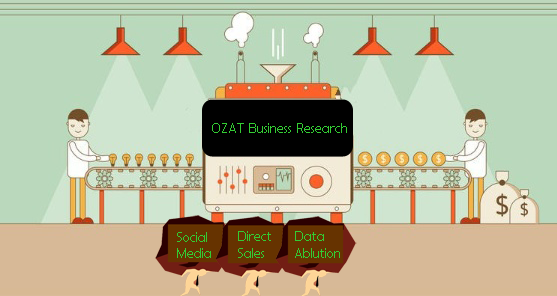
<style>
.page{position:relative;width:557px;height:296px}
.page>*{position:absolute;margin:0}
.t1{font:14px "BerlinSansFB-Reg";color:#33cc33}
</style>
<div class="page">
<p class="t1" style="left:177px;top:232px;width:34px;height:26px">Social<br>Media</p>
<p class="t1" style="left:238px;top:231px;width:33px;height:27px">Direct Sales</p>
<p class="t1" style="left:295px;top:231px;width:45px;height:27px">Data Ablution</p>
</div>
